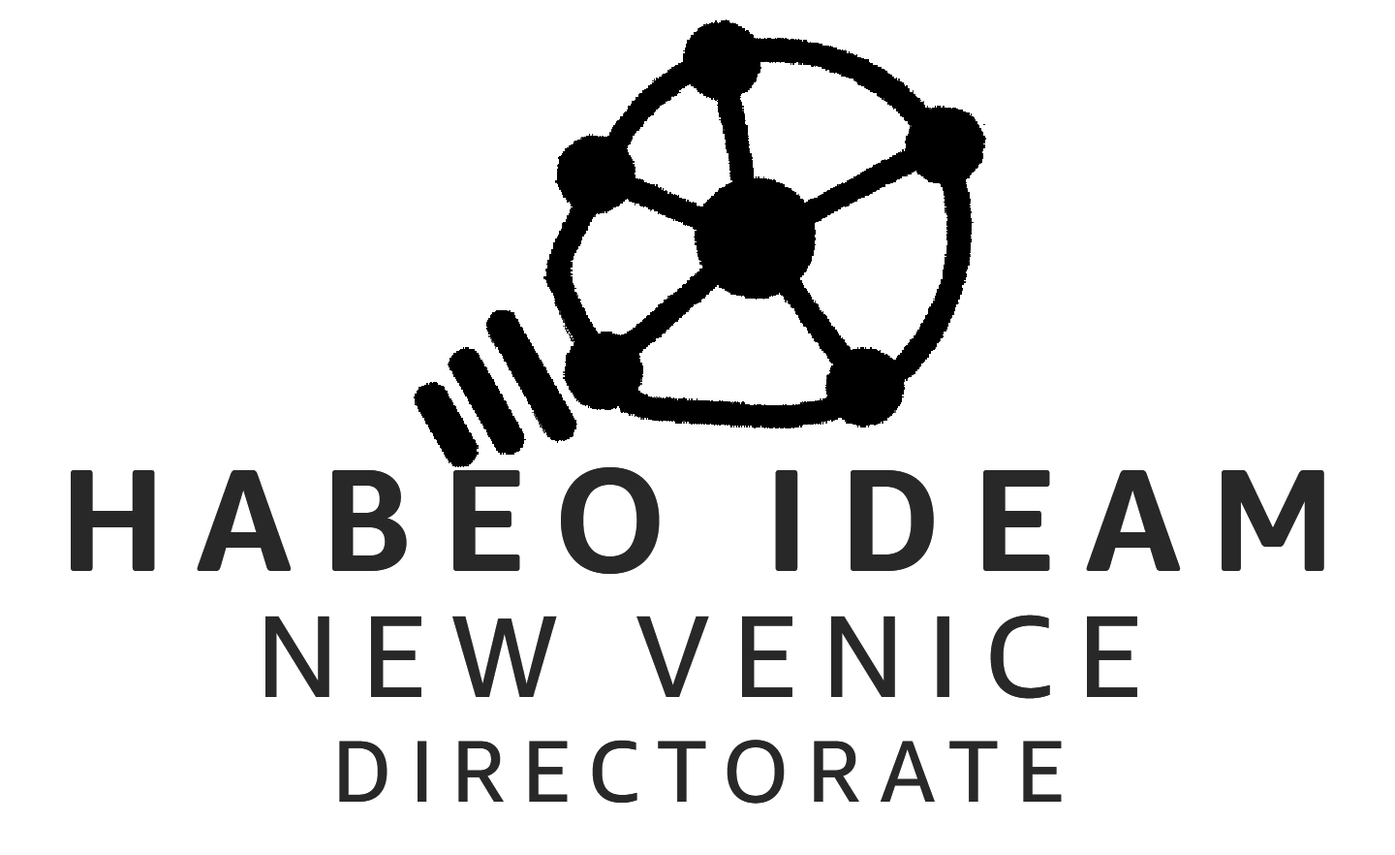
<style>
.page{position:relative;width:1395px;height:855px;background:#ffffff}
.page>*{position:absolute;margin:0}
.t1{font:145.3px "AmazonEmberDisplay-Bold";letter-spacing:0.2em;color:#282828;text-transform:uppercase}
.t2{font:116.3px "AmazonEmber-Regular";letter-spacing:0.2em;color:#282828;text-transform:uppercase}
.t3{font:87.2px "AmazonEmber-Regular";letter-spacing:0.2em;color:#282828;text-transform:uppercase}
</style>
<div class="page">
<p class="t1" style="left:71px;top:467px;width:1254px;height:107px">HABEO IDEAM</p>
<p class="t2" style="left:265px;top:614px;width:873px;height:85px">new venice</p>
<p class="t3" style="left:339px;top:739px;width:723px;height:64px">Directorate</p>
</div>
